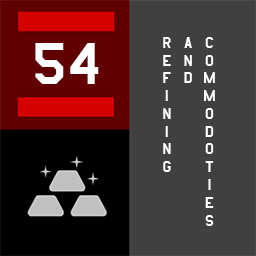
<style>
.page{position:relative;width:256px;height:256px;background:#404040}
.page>*{position:absolute;margin:0}
.t1{font:17.8px "AmarilloUSAF";color:#ffffff}
.t2{font:69.1px "AmarilloUSAF";color:#ffffff}
</style>
<div class="page">
<p class="t1" style="left:163px;top:37px;width:52px;height:189px">commodoties<br>and<br>refining</p>
<p class="t2" style="left:35px;top:43px;width:64px;height:41px">54</p>
</div>
